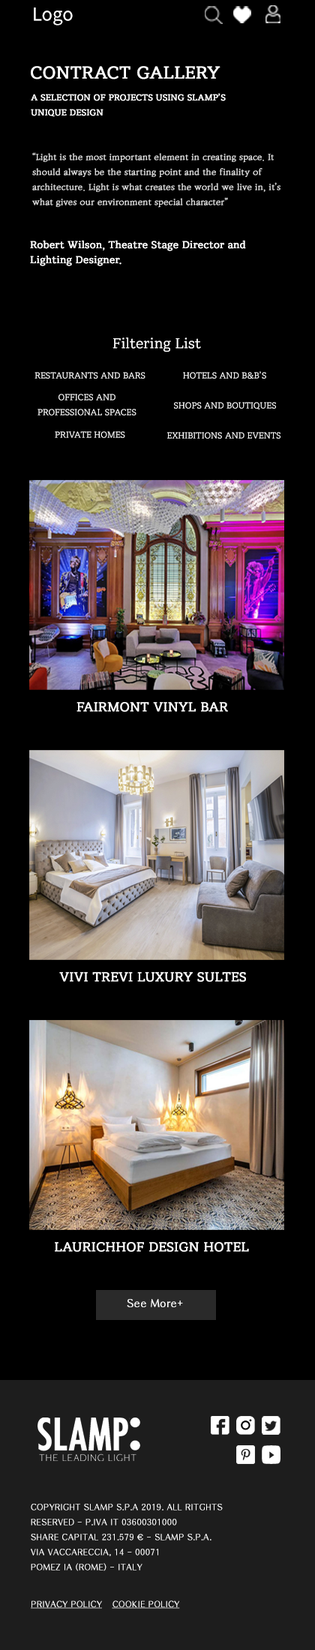
<style>
.page{position:relative;width:315px;height:1650px;background:#000000}
.page>*{position:absolute;margin:0}
.t1{font:18px "NotoSansKR-Regular";color:#ffffff}
.t2{font:18px "RIDIBatang";color:#ffffff;font-weight:bold}
.t3{font:9px/15px "RIDIBatang";color:#ffffff;font-weight:bold}
.t4{font:9px/15px "DXPnM-KSCpc-EUC-H";color:#dddddd;font-weight:bold}
.t5{font:10.5px/15px "RIDIBatang";color:#ffffff;font-weight:bold}
.t6{font:15px "RIDIBatang";color:#ffffff}
.t7{font:9px "RIDIBatang";color:#ffffff}
.t8{font:9px/15px "RIDIBatang";color:#ffffff}
.t9{font:13.5px "RIDIBatang";color:#ffffff;font-weight:bold}
.t10{font:10.5px "H2gprM";color:#fefefe;font-weight:bold}
.t11{font:8.2px/15px "H2gprM";color:#ffffff;font-weight:bold}
.t12{font:8.2px/15px "Gulim";color:#ffffff;font-weight:bold}
.t13{font:8.2px "H2gprM";color:#ffffff;font-weight:bold;text-decoration:underline}
</style>
<div class="page">
<p class="t1" style="left:34px;top:8px;width:39px;height:18px">Logo</p>
<p class="t2" style="left:31px;top:66px;width:189px;height:14px">CONTRACT GALLERY</p>
<p class="t3" style="left:31px;top:93px;width:195px;height:24px">A SELECTION OF PROJECTS USING SLAMP’S UNIQUE DESIGN</p>
<p class="t4" style="left:32px;top:152px;width:248px;height:56px">“Light is the most important element in creating space. It should always be the starting point and the finality of architecture. Light is what creates the world we live in, it’s what gives our environment special character”</p>
<p class="t5" style="left:30px;top:240px;width:216px;height:26px">Robert Wilson, Theatre Stage Director and <br>Lighting Designer.</p>
<p class="t6" style="left:112px;top:338px;width:89px;height:14px">Filtering List</p>
<p class="t7" style="left:34px;top:372px;width:112px;height:7px">RESTAURANTS AND BARS</p>
<p class="t7" style="left:183px;top:371px;width:83px;height:8px">HOTELS AND B&amp;B’S</p>
<p class="t8" style="left:38px;top:394px;width:98px;height:22px;text-align:center">OFFICES AND <br>PROFESSIONAL SPACES</p>
<p class="t7" style="left:174px;top:402px;width:102px;height:8px">SHOPS AND　BOUTIQUES</p>
<p class="t7" style="left:55px;top:431px;width:70px;height:7px">PRIVATE HOMES</p>
<p class="t7" style="left:167px;top:432px;width:113px;height:7px">EXHIBITIONS AND EVENTS</p>
<p class="t9" style="left:76px;top:702px;width:152px;height:10px">FAIRMONT VINYL BAR</p>
<p class="t9" style="left:59px;top:972px;width:187px;height:10px">VIVI TREVI LUXURY SULTES</p>
<p class="t9" style="left:55px;top:1242px;width:194px;height:10px">LAURICHHOF DESIGN HOTEL</p>
<p class="t10" style="left:127px;top:1299px;width:56px;height:8px">See More+</p>
<p class="t11" style="left:31px;top:1504px;width:192px;height:67px;text-align:center">COPYRIGHT SLAMP S.P.A 2019. ALL RITGHTS <br>RESERVED - P.IVA IT 03600301000  <br>SHARE CAPITAL 231.579 <span class="t12">€ </span>- SLAMP S.P.A. <br>VIA VACCARECCIA, 14 - 00071 <br>POMEZ IA (ROME) - ITALY</p>
<p class="t13" style="left:31px;top:1600px;width:71px;height:9px">PRIVACY POLICY</p>
<p class="t13" style="left:112px;top:1600px;width:68px;height:9px">COOKIE POLICY</p>
</div>
